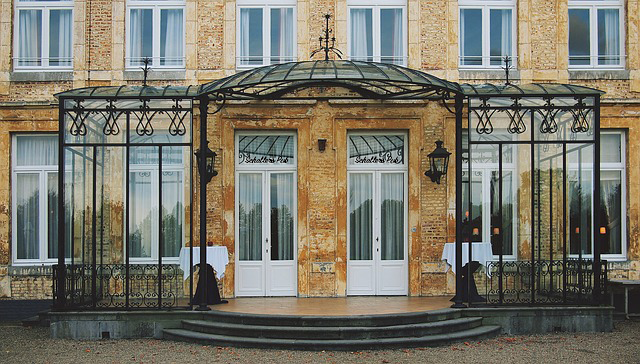
<style>
.page{position:relative;width:640px;height:364px}
.page>*{position:absolute;margin:0}
.t1{font:10px "SignPainter-HouseScript";color:#000000}
</style>
<div class="page">
<p class="t1" style="left:244px;top:156px;width:45px;height:7px">Schaller’s Pub</p>
<p class="t1" style="left:354px;top:156px;width:45px;height:7px">Schaller’s Pub</p>
</div>
